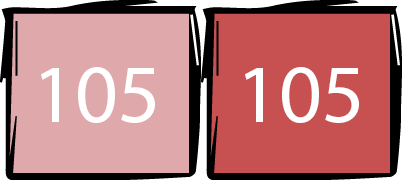
<style>
.page{position:relative;width:402px;height:180px;background:#c65150}
.page>*{position:absolute;margin:0}
.t1{font:83.3px "MyriadHebrew-Regular";color:#ffffff}
</style>
<div class="page">
<p class="t1" style="left:41px;top:67px;width:114px;height:56px">105</p>
<p class="t1" style="left:245px;top:67px;width:114px;height:56px">105</p>
</div>
